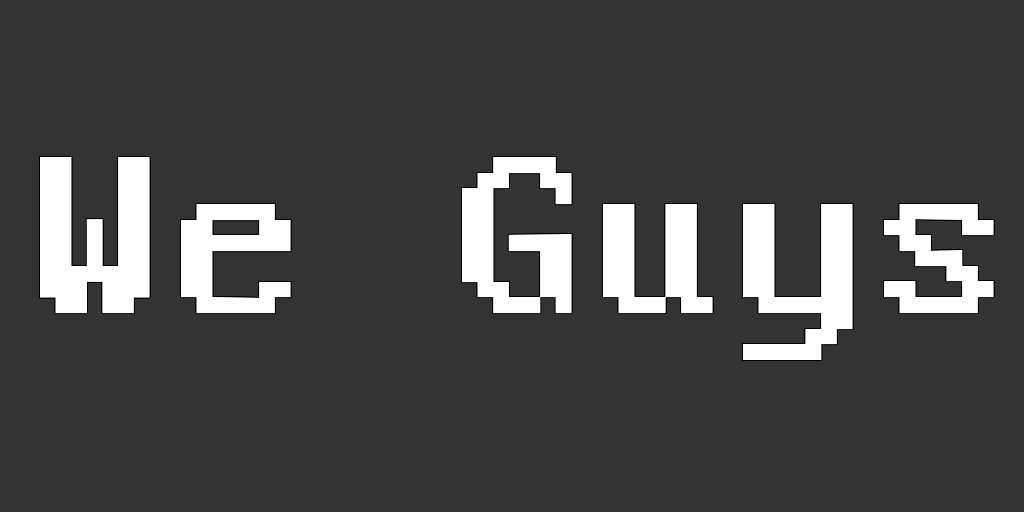
<style>
.page{position:relative;width:1024px;height:512px;background:#333333}
.page>*{position:absolute;margin:0}
.t1{font:250px "PerfectDOSVGA437";color:#ffffff}
</style>
<div class="page">
<p class="t1" style="left:40px;top:157px;width:954px;height:203px">We Guys</p>
</div>
